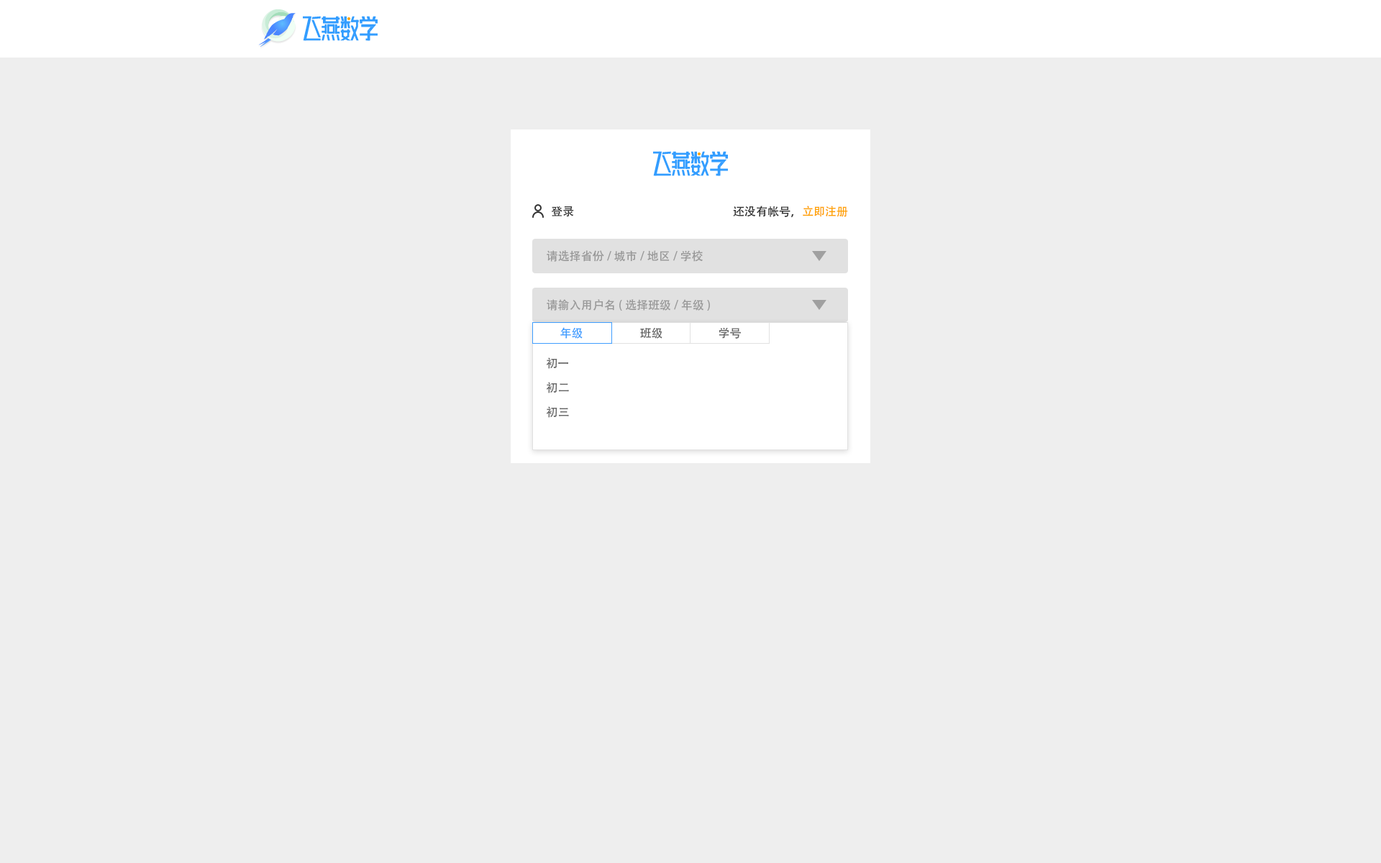
<style>
.page{position:relative;width:1381px;height:863px;background:#eeeeee}
.page>*{position:absolute;margin:0}
.t1{font:11.5px "AdobeHeitiStd-Regular";color:#333333}
.t2{font:11.5px "AdobeHeitiStd-Regular";color:#ffa200}
.t3{font:11.5px "AdobeHeitiStd-Regular";color:#999999}
.t4{font:11.5px "AdobeHeitiStd-Regular";color:#409eff}
.t5{font:11.5px "AdobeHeitiStd-Regular";color:#666666}
</style>
<div class="page">
<p class="t1" style="left:551px;top:206px;width:23px;height:11px">登录</p>
<p class="t1" style="left:733px;top:206px;width:115px;height:11px">还没有帐号，<span class="t2">立即注册</span></p>
<p class="t3" style="left:547px;top:250px;width:156px;height:12px">请选择省份/城市/地区/学校</p>
<p class="t3" style="left:547px;top:299px;width:163px;height:12px">请输入用户名(选择班级/年级)</p>
<p class="t4" style="left:560px;top:327px;width:23px;height:12px">年级</p>
<p class="t5" style="left:640px;top:327px;width:23px;height:12px">班级</p>
<p class="t5" style="left:719px;top:327px;width:22px;height:12px">学号</p>
<p class="t5" style="left:547px;top:358px;width:21px;height:11px">初一</p>
<p class="t5" style="left:547px;top:382px;width:22px;height:12px">初二</p>
<p class="t5" style="left:547px;top:406px;width:22px;height:12px">初三</p>
</div>
